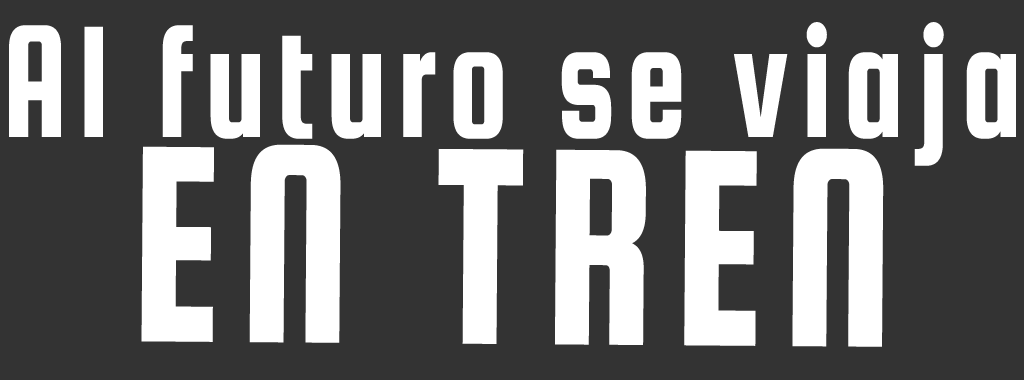
<style>
.page{position:relative;width:1024px;height:380px;background:#333333}
.page>*{position:absolute;margin:0}
.t1{font:169.9px "SquadaOne-Regular";letter-spacing:0.075em;color:#ffffff;scale:0.8 1}
.t2{font:300.5px "SquadaOne-Regular";letter-spacing:0.075em;color:#ffffff;scale:0.8 1}
</style>
<div class="page">
<p class="t1" style="left:9px;top:22px;width:1007px;height:144px">Al futuro se viaja</p>
<p class="t2" style="left:141px;top:144px;width:743px;height:203px">EN TREN</p>
</div>
